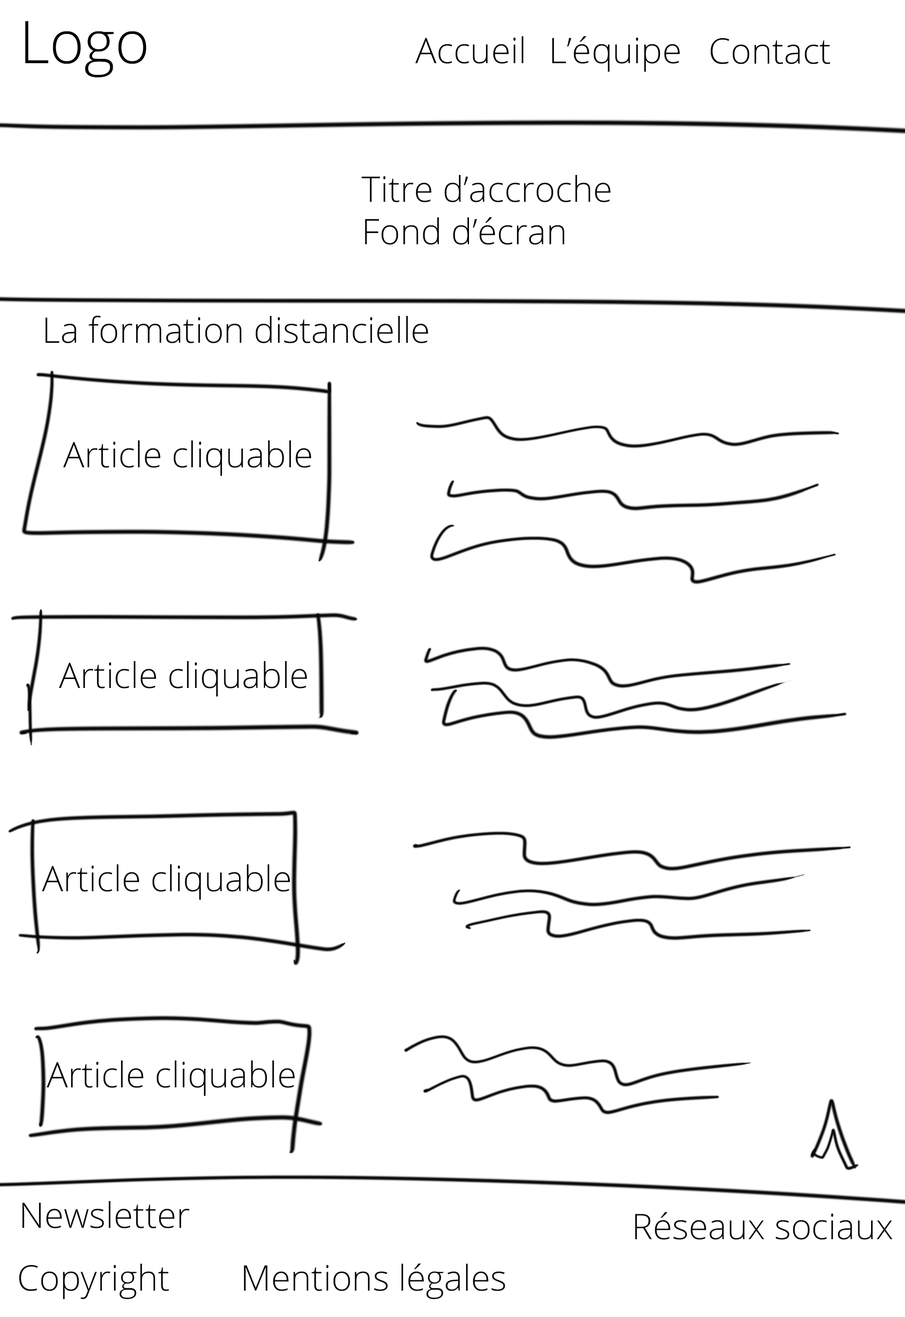
<style>
.page{position:relative;width:905px;height:1317px;background:#ffffff}
.page>*{position:absolute;margin:0}
.t1{font:58.9px "OpenSans-Light";color:#000000}
.t2{font:35.4px "OpenSans-Light";color:#000000}
.t3{font:35.4px "OpenSans-Light";color:#050505}
</style>
<div class="page">
<p class="t1" style="left:25px;top:21px;width:121px;height:56px">Logo</p>
<p class="t2" style="left:415px;top:36px;width:109px;height:28px">Accueil</p>
<p class="t2" style="left:552px;top:36px;width:128px;height:36px">L’équipe</p>
<p class="t2" style="left:711px;top:38px;width:119px;height:26px">Contact</p>
<p class="t3" style="left:362px;top:175px;width:249px;height:70px">Titre d’accroche<br>Fond d’écran</p>
<p class="t3" style="left:45px;top:315px;width:383px;height:28px">La formation distancielle</p>
<p class="t3" style="left:63px;top:440px;width:248px;height:36px">Article cliquable</p>
<p class="t3" style="left:59px;top:661px;width:248px;height:35px">Article cliquable</p>
<p class="t3" style="left:42px;top:864px;width:248px;height:36px">Article cliquable</p>
<p class="t3" style="left:47px;top:1061px;width:248px;height:35px">Article cliquable</p>
<p class="t3" style="left:22px;top:1201px;width:168px;height:27px">Newsletter</p>
<p class="t3" style="left:635px;top:1212px;width:258px;height:28px">Réseaux sociaux</p>
<p class="t3" style="left:19px;top:1264px;width:150px;height:35px">Copyright</p>
<p class="t3" style="left:244px;top:1263px;width:262px;height:36px">Mentions légales</p>
</div>
